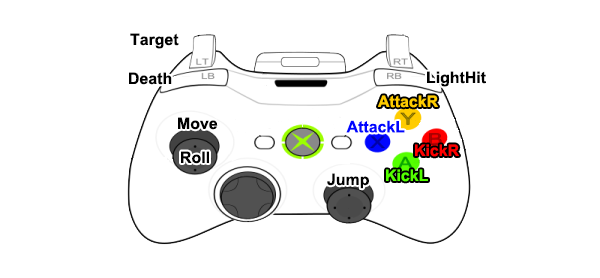
<style>
.page{position:relative;width:600px;height:278px;background:#ffffff}
.page>*{position:absolute;margin:0}
.t1{font:15.9px "Arial-BoldMT";color:#000000}
.t2{font:15.9px "Arial-BoldMT";color:#ffcc00}
.t3{font:15.9px "Arial-BoldMT";color:#0006ff}
.t4{font:15.9px "Arial-BoldMT";color:#ff0000}
.t5{font:15.9px "Arial-BoldMT";color:#54ff00}
</style>
<div class="page">
<p class="t1" style="left:130px;top:33px;width:49px;height:16px">Target</p>
<p class="t1" style="left:129px;top:72px;width:43px;height:13px">Death</p>
<p class="t1" style="left:427px;top:71px;width:59px;height:16px">LightHit</p>
<p class="t2" style="left:378px;top:95px;width:60px;height:13px">AttackR</p>
<p class="t1" style="left:178px;top:117px;width:40px;height:13px">Move</p>
<p class="t3" style="left:346px;top:120px;width:59px;height:13px">AttackL</p>
<p class="t4" style="left:415px;top:144px;width:44px;height:13px">KickR</p>
<p class="t1" style="left:181px;top:151px;width:28px;height:13px">Roll</p>
<p class="t1" style="left:327px;top:173px;width:42px;height:16px">Jump</p>
<p class="t5" style="left:386px;top:169px;width:42px;height:13px">KickL</p>
</div>
